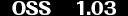
<style>
.page{position:relative;width:128px;height:16px;background:#000000}
.page>*{position:absolute;margin:0}
.t1{font:17px "FolkPro-Heavy";color:#ffffff}
</style>
<div class="page">
<p class="t1" style="left:12px;top:1px;width:39px;height:14px">OSS</p>
<p class="t1" style="left:77px;top:1px;width:39px;height:14px">1.03</p>
</div>
